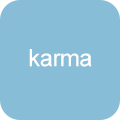
<style>
.page{position:relative;width:120px;height:120px;background:#88bdd7}
.page>*{position:absolute;margin:0}
.t1{font:24px "ArialMT";letter-spacing:-0.025em;color:#ffffff}
</style>
<div class="page">
<p class="t1" style="left:29px;top:49px;width:63px;height:18px">karma</p>
</div>
